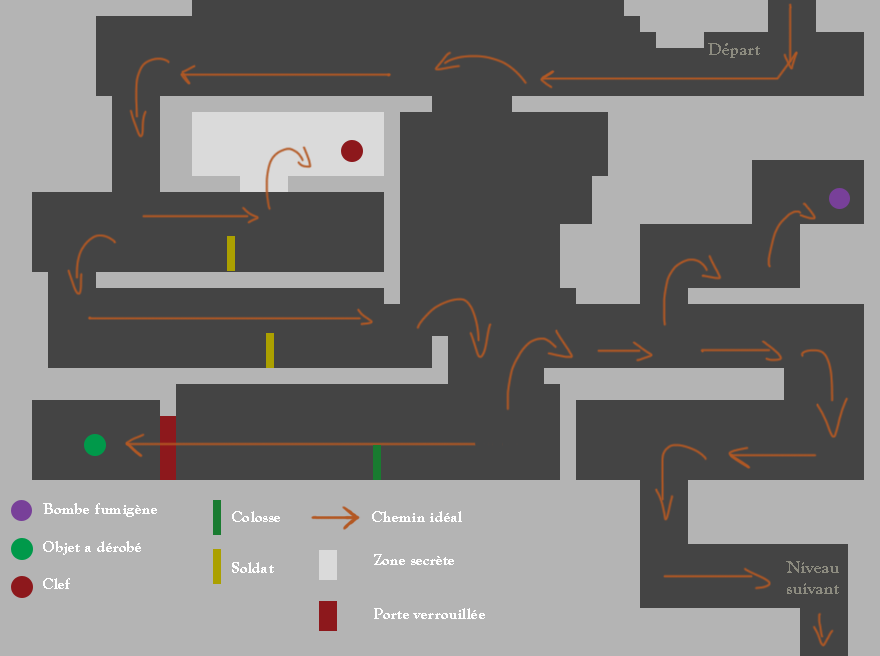
<style>
.page{position:relative;width:880px;height:656px;background:#444444}
.page>*{position:absolute;margin:0}
.t1{font:18px "GoudyOldStyleT-Bold";color:#8d8c80}
.t2{font:16.2px "GoudyOldStyleT-Bold";color:#ffffff}
</style>
<div class="page">
<p class="t1" style="left:708px;top:43px;width:52px;height:15px">Départ</p>
<p class="t2" style="left:43px;top:503px;width:114px;height:14px">Bombe fumigène</p>
<p class="t2" style="left:232px;top:511px;width:48px;height:11px">Colosse</p>
<p class="t2" style="left:372px;top:511px;width:90px;height:11px">Chemin idéal</p>
<p class="t2" style="left:43px;top:541px;width:98px;height:14px">Objet a dérobé</p>
<p class="t2" style="left:374px;top:554px;width:80px;height:11px">Zone secrète</p>
<p class="t2" style="left:232px;top:562px;width:42px;height:11px">Soldat</p>
<p class="t1" style="left:786px;top:561px;width:53px;height:33px">Niveau<br>suivant</p>
<p class="t2" style="left:43px;top:578px;width:27px;height:11px">Clef</p>
<p class="t2" style="left:374px;top:608px;width:111px;height:11px">Porte verrouillée</p>
</div>
